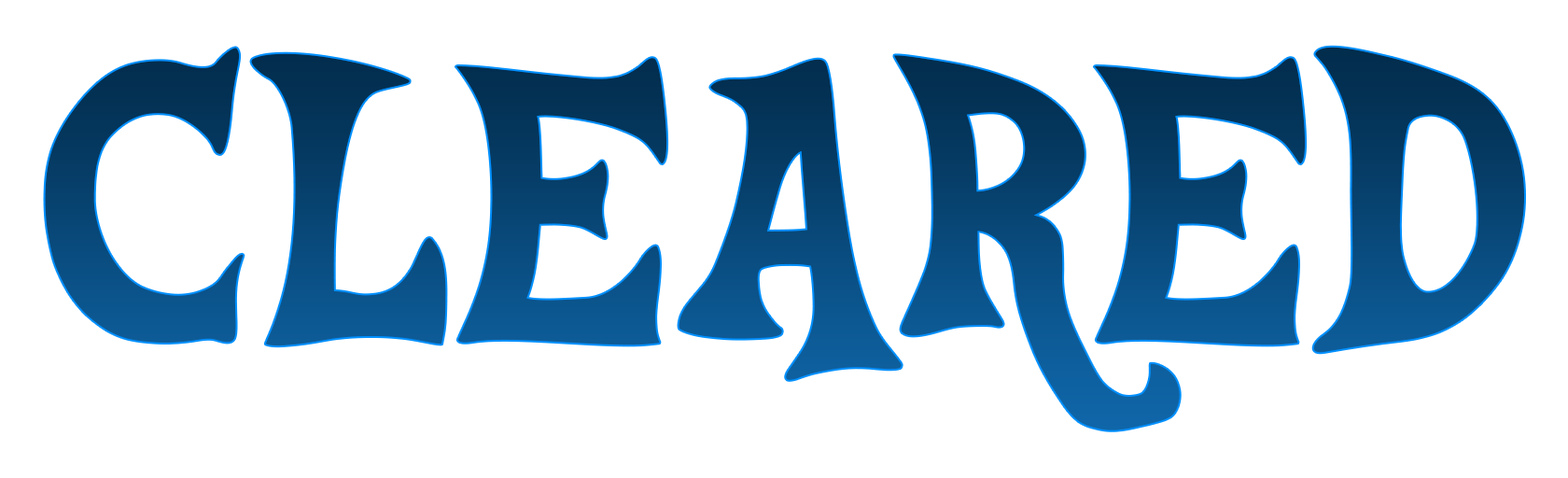
<style>
.page{position:relative;width:1568px;height:478px;background:#ffffff}
.page>*{position:absolute;margin:0}
.t1{font:445.7px "CelestiaReduxMedium"}
</style>
<div class="page">
<p class="t1" style="left:45px;top:47px;width:1479px;height:383px">CLEARED</p>
</div>
